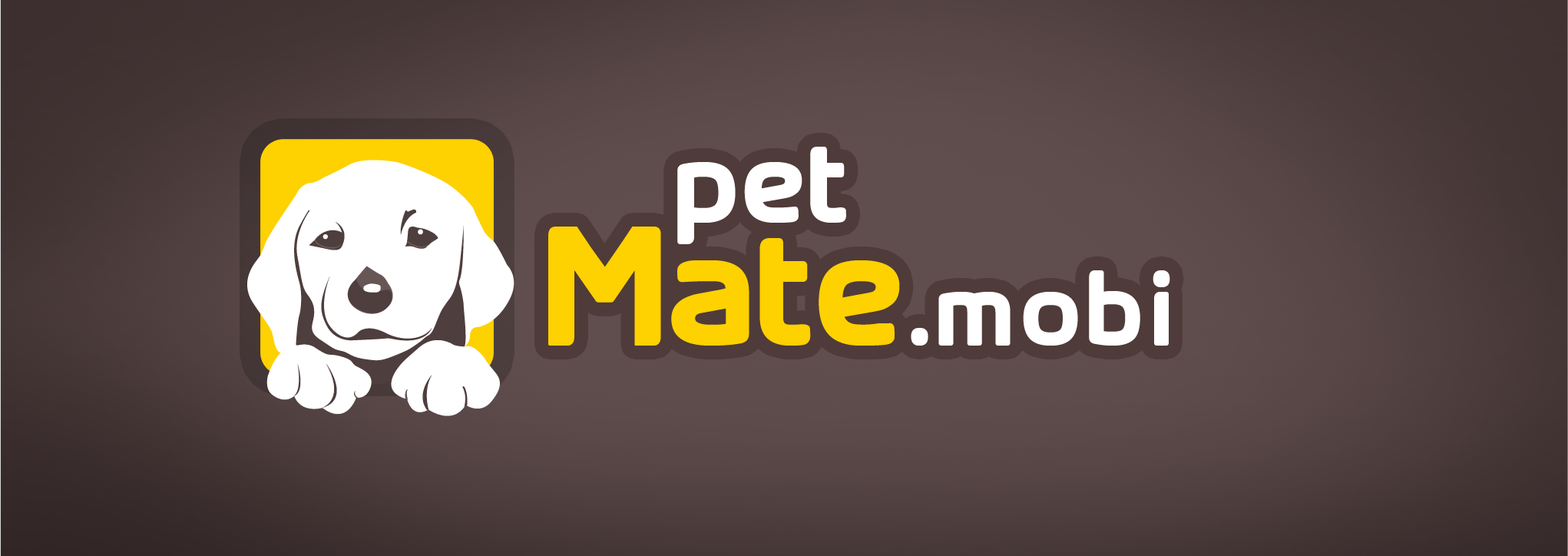
<style>
.page{position:relative;width:1568px;height:556px}
.page>*{position:absolute;margin:0}
.t1{font:108.8px "SKYfontThick";color:#ffffff}
.t2{font:153.6px "SKYfontThick";letter-spacing:-0.021em;color:#fed101}
.t3{font:96px "SKYfontThick";letter-spacing:0.05em;color:#ffffff}
.t4{font:96px "SKYfontThick";letter-spacing:0.07em;color:#ffffff}
</style>
<div class="page">
<p class="t1" style="left:677px;top:147px;width:169px;height:97px">pet</p>
<p class="t2" style="left:548px;top:227px;width:352px;height:119px">Mate</p>
<p class="t3" style="left:911px;top:270px;width:259px;height:76px"><span class="t4">.</span>mobi</p>
</div>
